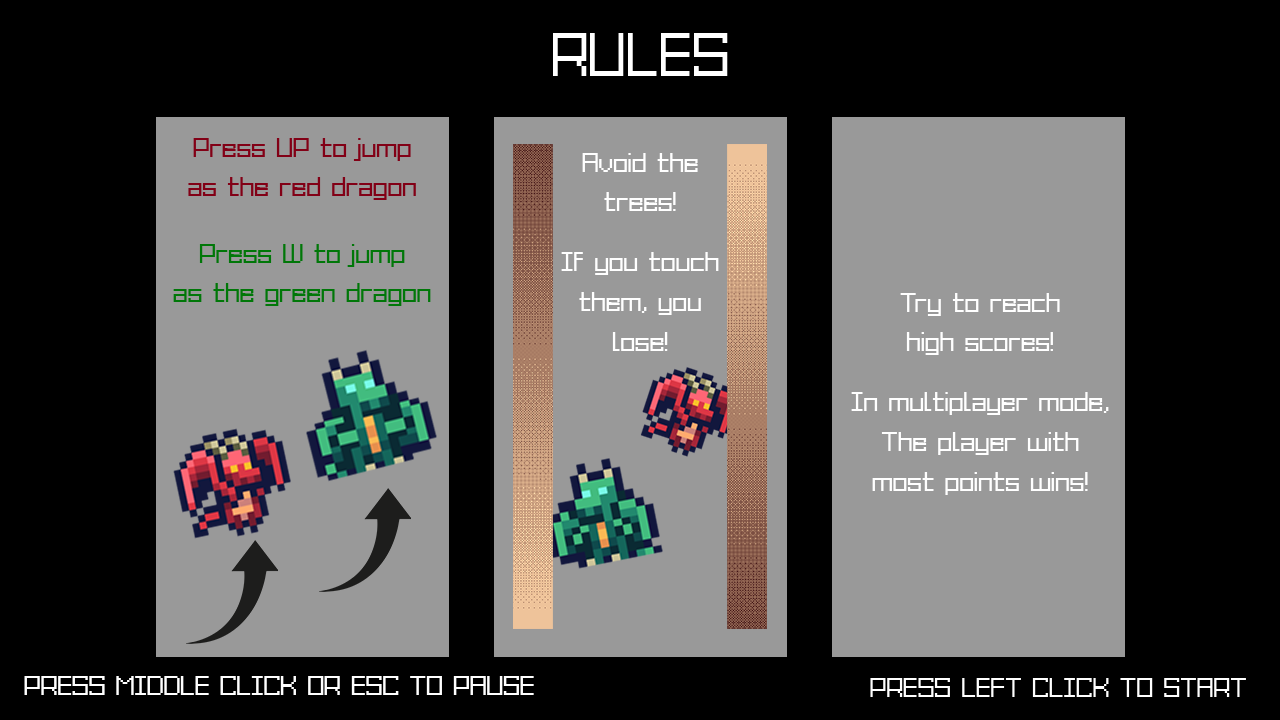
<style>
.page{position:relative;width:1280px;height:720px;background:#000000}
.page>*{position:absolute;margin:0}
.t1{font:37.5px "GrixelAcme9Regular";color:#ffffff}
.t2{font:16.7px "GrixelAcme9Regular";color:#820016}
.t3{font:16.7px "GrixelAcme9Regular";color:#ffffff}
.t4{font:16.7px "GrixelAcme9Regular";color:#007708}
</style>
<div class="page">
<p class="t1" style="left:553px;top:33px;width:175px;height:43px">RULES</p>
<p class="t2" style="left:188px;top:138px;width:228px;height:62px;text-align:center">Press UP to jump<br><br>as the red dragon</p>
<p class="t3" style="left:561px;top:153px;width:158px;height:198px;text-align:center">Avoid the<br><br>trees!<br><br><br>If you touch<br><br>them, you<br><br>lose!</p>
<p class="t4" style="left:173px;top:244px;width:258px;height:62px;text-align:center">Press W to jump<br><br>as the green dragon</p>
<p class="t3" style="left:851px;top:293px;width:258px;height:202px;text-align:center">Try to reach<br> <br>high scores!<br><br><br>In multiplayer mode,<br><br>The player with<br><br>most points wins!</p>
<p class="t3" style="left:24px;top:676px;width:510px;height:19px">PRESS MIDDLE CLICK OR ESC TO PAUSE</p>
<p class="t3" style="left:870px;top:678px;width:376px;height:19px">PRESS LEFT CLICK TO START</p>
</div>
